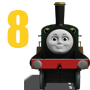
<style>
.page{position:relative;width:90px;height:90px;background:#ffffff}
.page>*{position:absolute;margin:0}
.t1{font:45px "Impact";color:#fcce21}
</style>
<div class="page">
<p class="t1" style="left:7px;top:10px;width:22px;height:38px">8</p>
</div>
